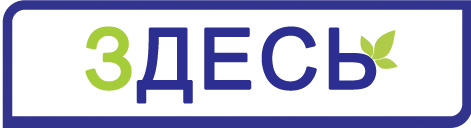
<style>
.page{position:relative;width:471px;height:128px;background:#ffffff}
.page>*{position:absolute;margin:0}
.t1{font:83.3px "ArialMT";letter-spacing:0.025em;color:#2c2f91;text-transform:uppercase;font-weight:bold}
.t2{font:83.3px "ArialMT";letter-spacing:0.025em;color:#a5cc39;text-transform:uppercase;font-weight:bold}
</style>
<div class="page">
<p class="t1" style="left:85px;top:26px;width:292px;height:78px"><span class="t2">З</span>ДЕСЬ</p>
</div>
